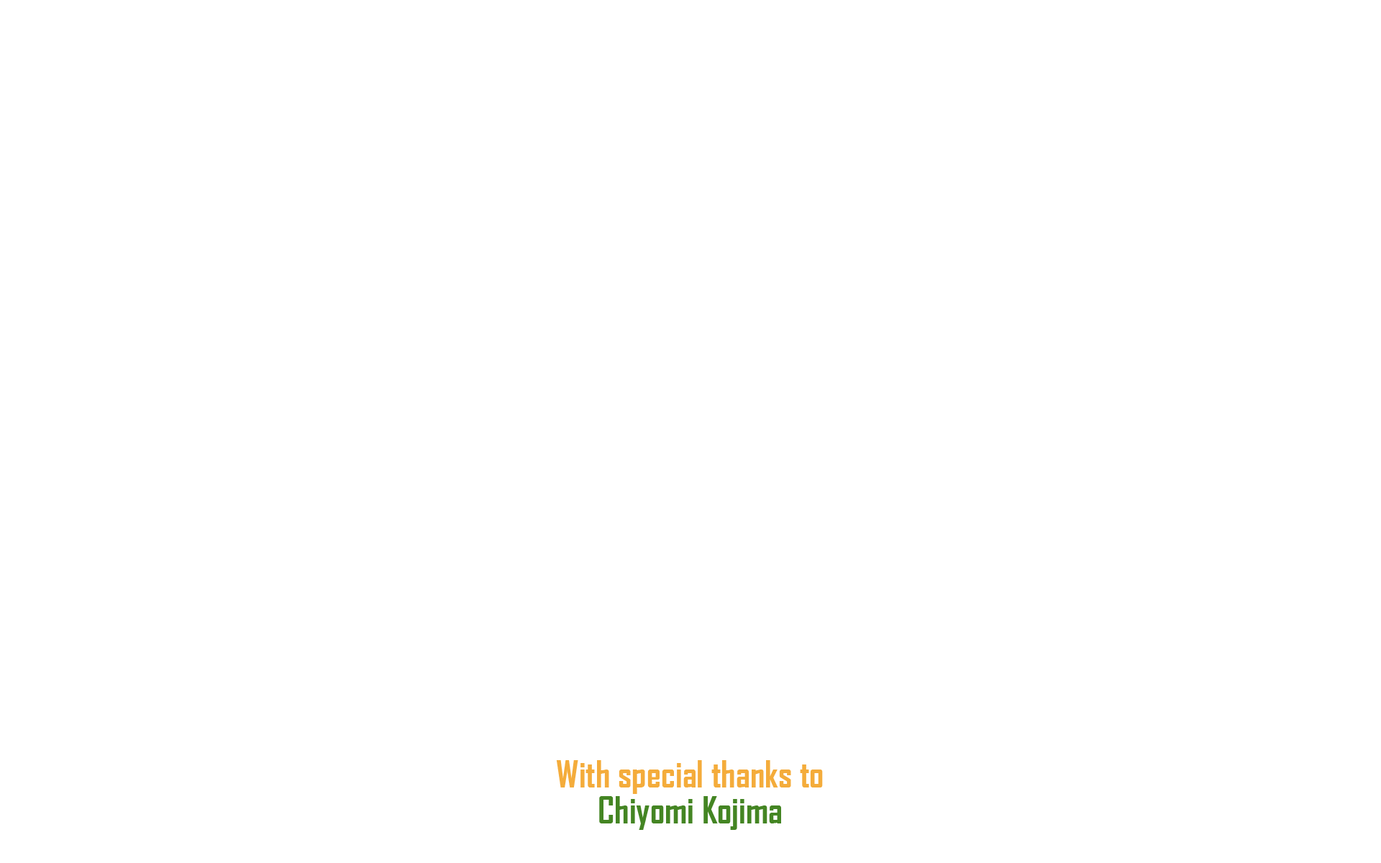
<style>
.page{position:relative;width:1381px;height:863px;background:#ffffff}
.page>*{position:absolute;margin:0}
.t1{font:36px/36px "AgencyFB-Bold";color:#f4ac3b}
.t2{font:36px/36px "AgencyFB-Bold";color:#448523}
</style>
<div class="page">
<p class="t1" style="left:556px;top:760px;width:267px;height:70px;text-align:center">With special thanks to<br><span class="t2">Chiyomi Kojima</span></p>
</div>
